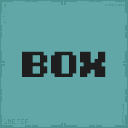
<style>
.page{position:relative;width:128px;height:128px;background:#62a7a7}
.page>*{position:absolute;margin:0}
.t1{font:37px "KemcoPixelBold";color:#1e1e1e}
</style>
<div class="page">
<p class="t1" style="left:22px;top:51px;width:84px;height:26px">Box</p>
</div>
